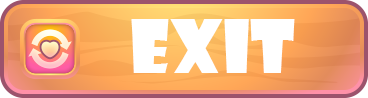
<style>
.page{position:relative;width:368px;height:98px}
.page>*{position:absolute;margin:0}
.t1{font:72px "ShowcardGothic-Reg";color:#ffffff}
</style>
<div class="page">
<p class="t1" style="left:131px;top:19px;width:164px;height:54px">EXIT</p>
</div>
